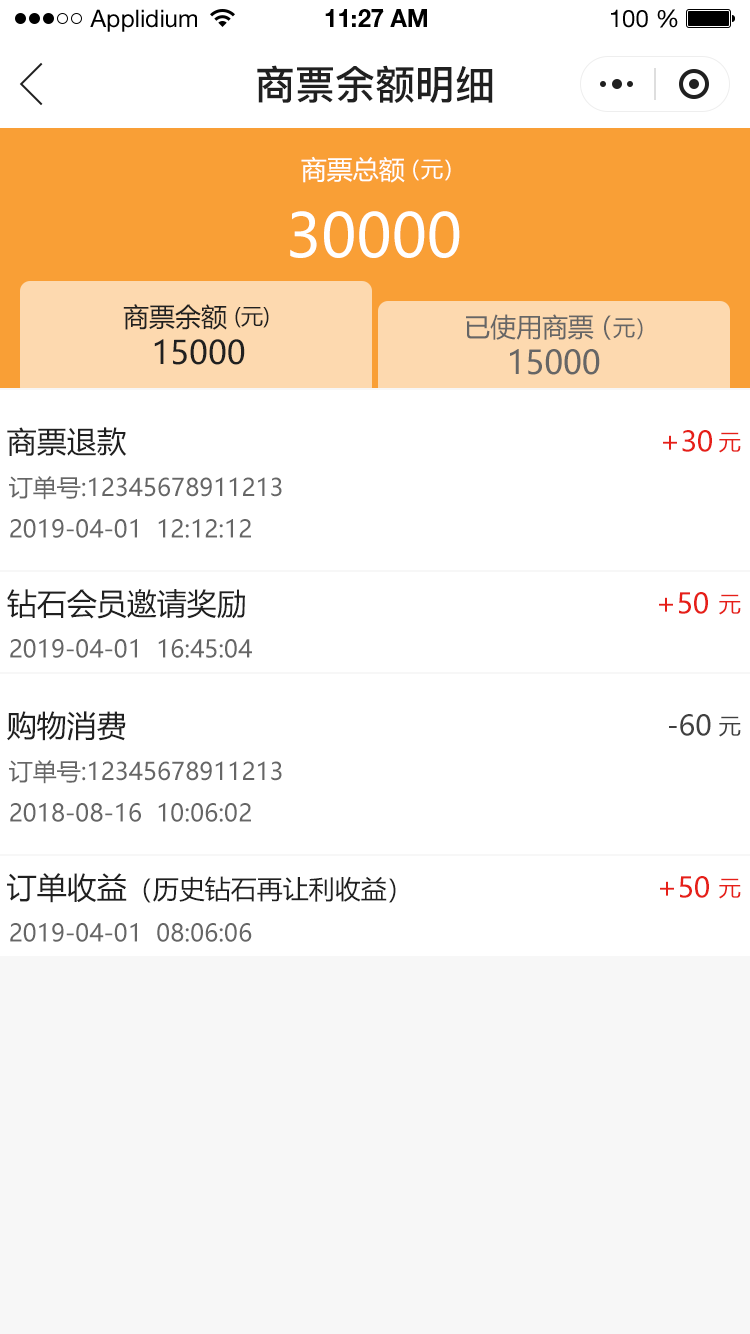
<style>
.page{position:relative;width:750px;height:1334px;background:#ffffff}
.page>*{position:absolute;margin:0}
.t1{font:24px "HelveticaNeueLTStd-Roman";color:#000000}
.t2{font:24px "HelveticaNeueLTStd-Bd";color:#000000}
.t3{font:40px "PingFang-SC-Bold";color:#202020;text-transform:uppercase}
.t4{font:26px "MicrosoftYaHei";color:#ffffff;text-transform:uppercase}
.t5{font:22px "MicrosoftYaHei";color:#ffffff;text-transform:uppercase}
.t6{font:60px "MicrosoftYaHei";color:#ffffff;text-transform:uppercase}
.t7{font:26px "MicrosoftYaHei";color:#202020;text-transform:uppercase}
.t8{font:22px "MicrosoftYaHei";color:#202020;text-transform:uppercase}
.t9{font:26.2px "MicrosoftYaHei";color:#666666;text-transform:uppercase}
.t10{font:22.2px "MicrosoftYaHei";color:#666666;text-transform:uppercase}
.t11{font:32px "MicrosoftYaHei";color:#202020;text-transform:uppercase}
.t12{font:32.2px "MicrosoftYaHei";color:#666666;text-transform:uppercase}
.t13{font:30px "MicrosoftYaHei";color:#202020;text-transform:uppercase}
.t14{font:28px "MicrosoftYaHei";color:#e61f18;text-transform:uppercase}
.t15{font:22px "MicrosoftYaHei";color:#e61f18;text-transform:uppercase}
.t16{font:24px "MicrosoftYaHei";color:#666666;text-transform:uppercase}
.t17{font:28px "MicrosoftYaHei";color:#404040;text-transform:uppercase}
.t18{font:22px "MicrosoftYaHei";color:#404040;text-transform:uppercase}
</style>
<div class="page">
<p class="t1" style="left:90px;top:9px;width:107px;height:23px">Applidium</p>
<p class="t2" style="left:325px;top:9px;width:102px;height:18px">11:27 AM</p>
<p class="t1" style="left:611px;top:9px;width:67px;height:19px">100 %</p>
<p class="t3" style="left:257px;top:65px;width:236px;height:38px">商票余额明细</p>
<p class="t4" style="left:301px;top:156px;width:104px;height:27px">商票总额</p>
<p class="t5" style="left:413px;top:159px;width:38px;height:22px">（元）</p>
<p class="t6" style="left:290px;top:211px;width:170px;height:47px">30000</p>
<p class="t7" style="left:123px;top:304px;width:104px;height:26px">商票余额</p>
<p class="t8" style="left:235px;top:307px;width:34px;height:21px">(元)</p>
<p class="t9" style="left:466px;top:314px;width:128px;height:26px">已使用商票</p>
<p class="t10" style="left:604px;top:315px;width:39px;height:25px"><span class="t9">（</span>元）</p>
<p class="t11" style="left:154px;top:339px;width:91px;height:26px">15000</p>
<p class="t12" style="left:510px;top:349px;width:90px;height:26px">15000</p>
<p class="t13" style="left:7px;top:427px;width:120px;height:29px">商票退款</p>
<p class="t14" style="left:663px;top:430px;width:49px;height:22px">+30</p>
<p class="t15" style="left:719px;top:432px;width:22px;height:21px">元</p>
<p class="t16" style="left:9px;top:476px;width:273px;height:24px">订单号:12345678911213</p>
<p class="t16" style="left:10px;top:519px;width:241px;height:19px">2019-04-01  12:12:12</p>
<p class="t13" style="left:7px;top:589px;width:238px;height:30px">钻石会员邀请奖励</p>
<p class="t14" style="left:659px;top:592px;width:49px;height:22px">+50</p>
<p class="t15" style="left:719px;top:594px;width:22px;height:21px">元</p>
<p class="t16" style="left:10px;top:639px;width:242px;height:19px">2019-04-01  16:45:04</p>
<p class="t13" style="left:7px;top:711px;width:119px;height:30px">购物消费</p>
<p class="t17" style="left:669px;top:714px;width:42px;height:22px">-60</p>
<p class="t18" style="left:719px;top:716px;width:22px;height:21px">元</p>
<p class="t16" style="left:9px;top:760px;width:273px;height:24px">订单号:12345678911213</p>
<p class="t16" style="left:10px;top:803px;width:241px;height:19px">2018-08-16  10:06:02</p>
<p class="t7" style="left:7px;top:873px;width:389px;height:30px"><span class="t13">订单收益</span>（历史钻石再让利收益）</p>
<p class="t14" style="left:660px;top:876px;width:49px;height:22px">+50</p>
<p class="t15" style="left:719px;top:878px;width:22px;height:21px">元</p>
<p class="t16" style="left:10px;top:923px;width:242px;height:19px">2019-04-01  08:06:06</p>
</div>
